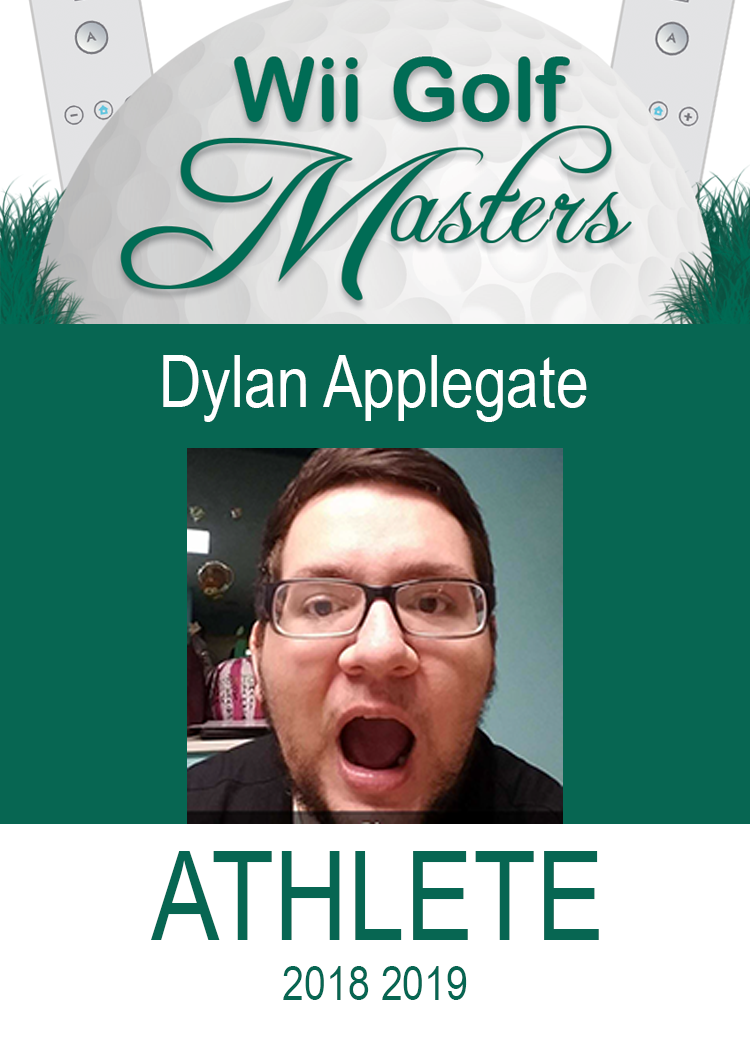
<style>
.page{position:relative;width:750px;height:1050px;background:#076652}
.page>*{position:absolute;margin:0}
.t1{font:72px "ArialNarrow";color:#ffffff}
.t2{font:125px "ArialNarrow";color:#076652}
.t3{font:48px "ArialNarrow";color:#076652}
</style>
<div class="page">
<p class="t1" style="left:163px;top:355px;width:424px;height:67px">Dylan Applegate</p>
<p class="t2" style="left:151px;top:851px;width:448px;height:89px">ATHLETE</p>
<p class="t3" style="left:283px;top:966px;width:184px;height:34px">2018 2019</p>
</div>
